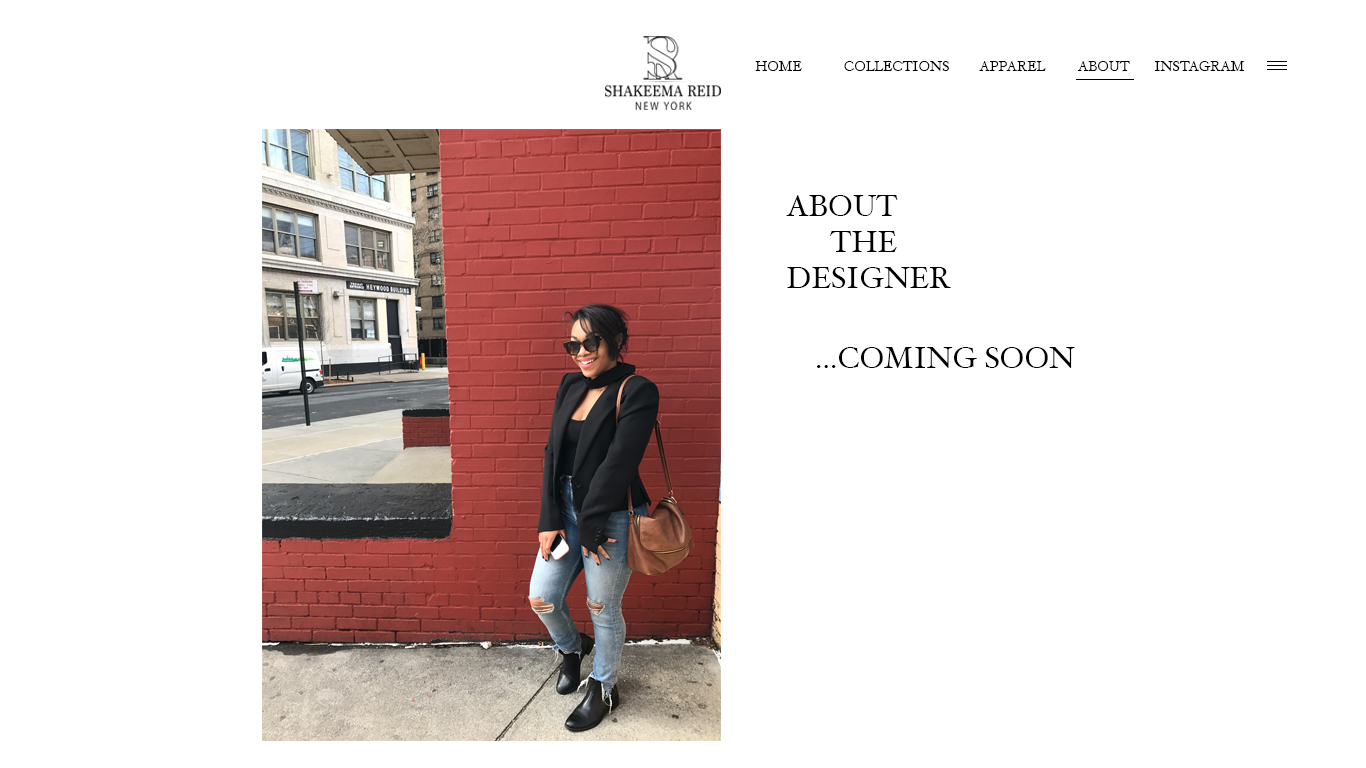
<style>
.page{position:relative;width:1366px;height:768px;background:#ffffff}
.page>*{position:absolute;margin:0}
.t1{font:14px "HoeflerText-Regular";color:#000000}
.t2{font:30px "HoeflerText-Regular";color:#000000}
</style>
<div class="page">
<p class="t1" style="left:755px;top:61px;width:47px;height:10px">HOME</p>
<p class="t1" style="left:844px;top:61px;width:105px;height:10px">COLLECTIONS</p>
<p class="t1" style="left:979px;top:61px;width:67px;height:10px">APPAREL</p>
<p class="t1" style="left:1077px;top:61px;width:53px;height:10px">ABOUT</p>
<p class="t1" style="left:1154px;top:61px;width:90px;height:10px">INSTAGRAM</p>
<p class="t2" style="left:786px;top:195px;width:165px;height:93px">ABOUT <br>      THE <br>DESIGNER</p>
<p class="t2" style="left:817px;top:347px;width:258px;height:21px">...COMING SOON</p>
</div>
